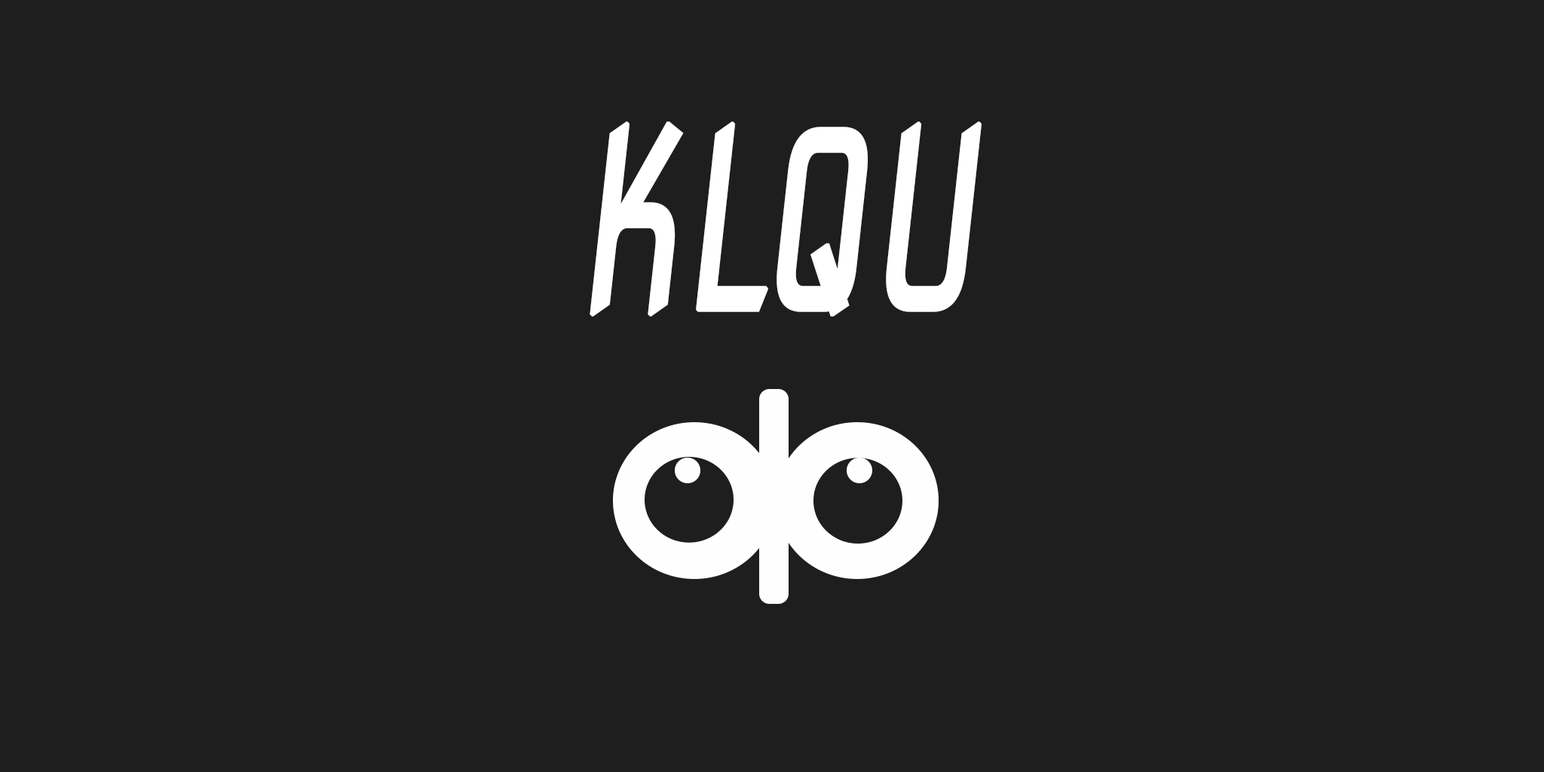
<style>
.page{position:relative;width:1544px;height:772px;background:#1e1e1e}
.page>*{position:absolute;margin:0}
.t1{font:246px "NovaSquare";color:#ffffff;font-weight:bold;font-style:italic;scale:0.62 1}
</style>
<div class="page">
<p class="t1" style="left:590px;top:121px;width:392px;height:196px">KLQU</p>
</div>
